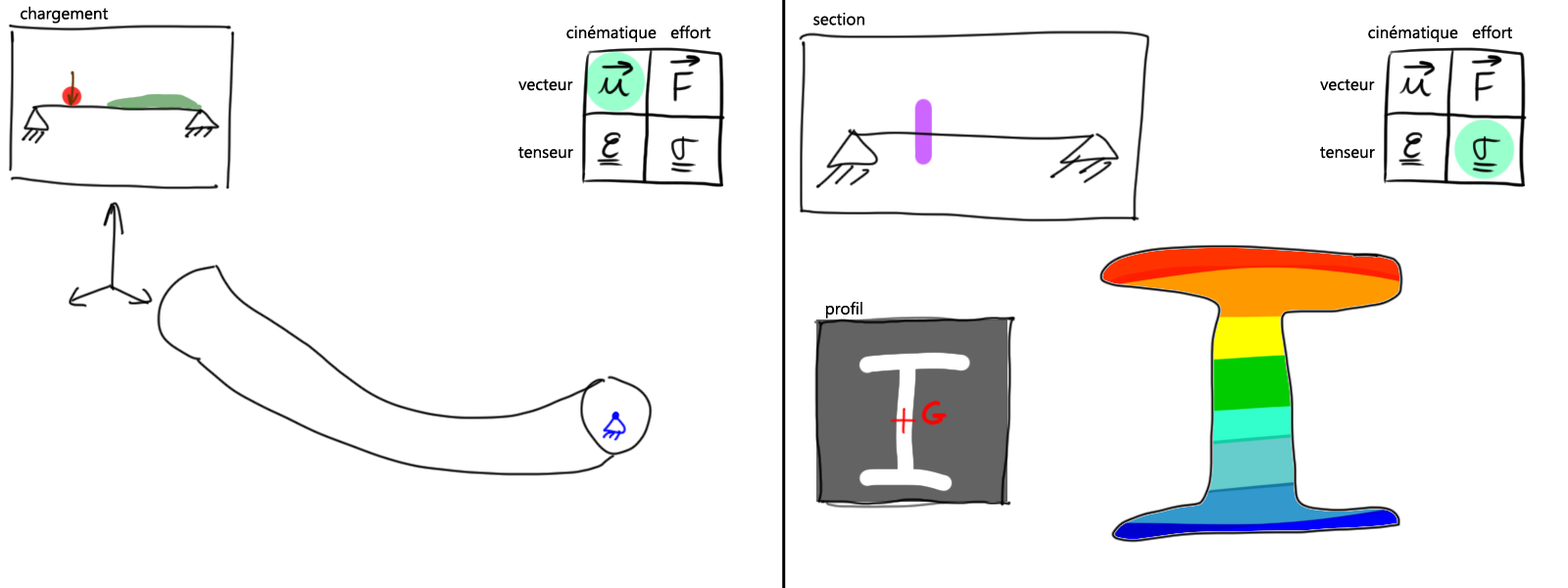
<style>
.page{position:relative;width:1568px;height:588px;background:#ffffff}
.page>*{position:absolute;margin:0}
.t1{font:16.7px "SegoeUI";color:#000000}
</style>
<div class="page">
<p class="t1" style="left:21px;top:6px;width:87px;height:18px">chargement</p>
<p class="t1" style="left:813px;top:12px;width:51px;height:13px">section</p>
<p class="t1" style="left:566px;top:25px;width:91px;height:17px">cinématique</p>
<p class="t1" style="left:670px;top:25px;width:40px;height:14px">effort</p>
<p class="t1" style="left:1368px;top:25px;width:90px;height:17px">cinématique</p>
<p class="t1" style="left:1472px;top:25px;width:40px;height:14px">effort</p>
<p class="t1" style="left:518px;top:78px;width:55px;height:13px">vecteur</p>
<p class="t1" style="left:1320px;top:78px;width:55px;height:13px">vecteur</p>
<p class="t1" style="left:518px;top:146px;width:55px;height:13px">tenseur</p>
<p class="t1" style="left:1320px;top:146px;width:55px;height:13px">tenseur</p>
<p class="t1" style="left:826px;top:301px;width:36px;height:17px">profil</p>
</div>
